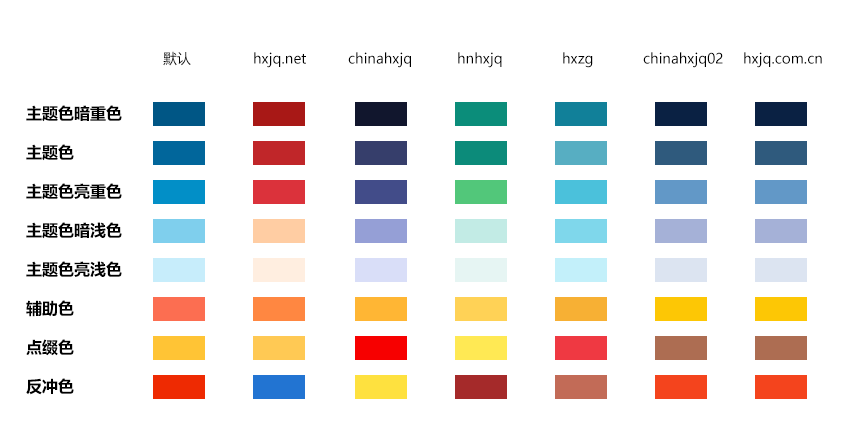
<style>
.page{position:relative;width:850px;height:444px;background:#ffffff}
.page>*{position:absolute;margin:0}
.t1{font:14px "MicrosoftYaHei";color:#000000;text-transform:uppercase}
.t2{font:14px "MicrosoftYaHei";color:#000000}
.t3{font:16px/39px "MicrosoftYaHei-Bold";color:#000000;text-transform:uppercase}
</style>
<div class="page">
<p class="t1" style="left:163px;top:51px;width:28px;height:15px">默认</p>
<p class="t2" style="left:254px;top:52px;width:52px;height:16px">hxjq.net</p>
<p class="t2" style="left:348px;top:52px;width:63px;height:16px">chinahxjq</p>
<p class="t2" style="left:458px;top:52px;width:44px;height:16px">hnhxjq</p>
<p class="t2" style="left:563px;top:52px;width:30px;height:16px">hxzg</p>
<p class="t2" style="left:643px;top:52px;width:80px;height:16px">chinahxjq02</p>
<p class="t2" style="left:744px;top:52px;width:78px;height:16px">hxjq.com.cn</p>
<p class="t3" style="left:26px;top:105px;width:96px;height:290px;text-align:justify">主题色暗重色<br>主题色<br>主题色亮重色<br>主题色暗浅色<br>主题色亮浅色<br>辅助色<br>点缀色<br>反冲色</p>
</div>
